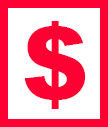
<style>
.page{position:relative;width:108px;height:127px;background:#ffffff}
.page>*{position:absolute;margin:0}
.t1{font:100px "Arial-Black";color:#ff0033}
</style>
<div class="page">
<p class="t1" style="left:24px;top:21px;width:62px;height:88px">$</p>
</div>
